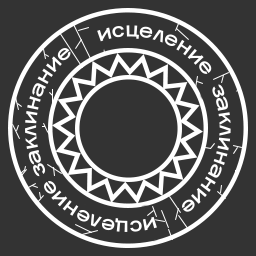
<style>
.page{position:relative;width:256px;height:256px;background:#333333}
.page>*{position:absolute;margin:0}
.t1{font:22.2px "FranklinGothic-Book";color:#ffffff}
.t2{font:22.1px "FranklinGothic-Book";color:#ffffff}
</style>
<div class="page">
<p class="t1" style="left:97px;top:25px;width:115px;height:49px;rotate:21deg">исцеление</p>
<p class="t1" style="left:25px;top:48px;width:46px;height:129px;rotate:-77deg">заклинание</p>
<p class="t2" style="left:182px;top:84px;width:49px;height:128px;rotate:105deg">заклинание</p>
<p class="t1" style="left:44px;top:181px;width:113px;height:51px;rotate:-157deg">исцеление</p>
</div>
